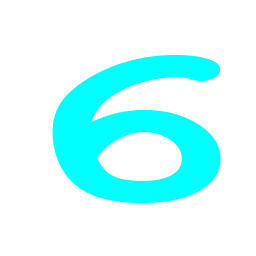
<style>
.page{position:relative;width:256px;height:256px;background:#ffffff}
.page>*{position:absolute;margin:0}
.t1{font:222.5px "CourierNewPS-BoldMT";color:#00ffff;scale:1.73 1}
</style>
<div class="page">
<p class="t1" style="left:52px;top:55px;width:169px;height:148px">6</p>
</div>
